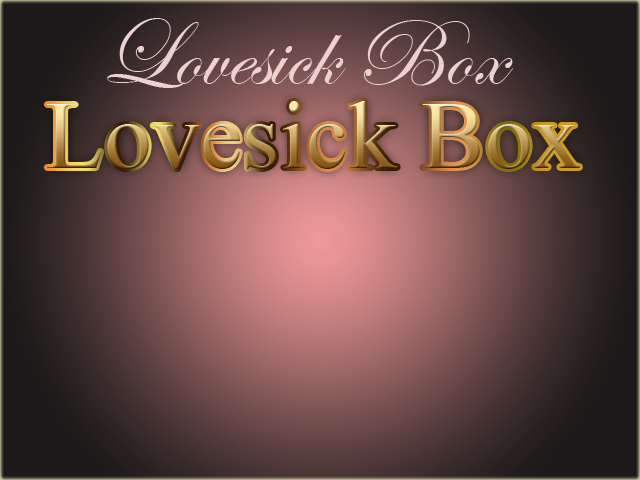
<style>
.page{position:relative;width:640px;height:480px}
.page>*{position:absolute;margin:0}
.t1{font:96px "EdwardianScriptITC";color:#ecd1d1}
.t2{font:96px "TimesNewRomanPSMT"}
</style>
<div class="page">
<p class="t1" style="left:107px;top:18px;width:406px;height:70px">Lovesick Box</p>
<p class="t2" style="left:46px;top:101px;width:534px;height:68px">Lovesick Box</p>
</div>
